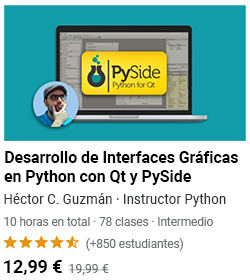
<style>
.page{position:relative;width:250px;height:280px;background:#ffffff}
.page>*{position:absolute;margin:0}
.t1{font:16.2px/19px "Roboto-Bold";color:#000000}
.t2{font:13.8px "Roboto-Regular";color:#303335}
.t3{font:12.1px "Roboto-Regular";color:#6a6f73;scale:0.97 1}
.t4{font:12px "Roboto-Regular";color:#6a6f73}
.t5{font:18.3px "Roboto-Bold";color:#000000;scale:0.97 1}
.t6{font:12.8px "Roboto-Regular";color:#6a6f73}
</style>
<div class="page">
<p class="t1" style="left:4px;top:151px;width:234px;height:34px">Desarrollo de Interfaces Gráficas en Python con Qt y PySide</p>
<p class="t2" style="left:4px;top:193px;width:222px;height:14px">Héctor C. Guzmán · Instructor Python</p>
<p class="t3" style="left:4px;top:217px;width:209px;height:9px">10 horas en total · 78 clases · Intermedio</p>
<p class="t4" style="left:86px;top:238px;width:97px;height:13px">(+850 estudiantes)</p>
<p class="t5" style="left:4px;top:260px;width:58px;height:15px">12,99 €</p>
<p class="t6" style="left:68px;top:264px;width:41px;height:11px">19,99 €</p>
</div>
